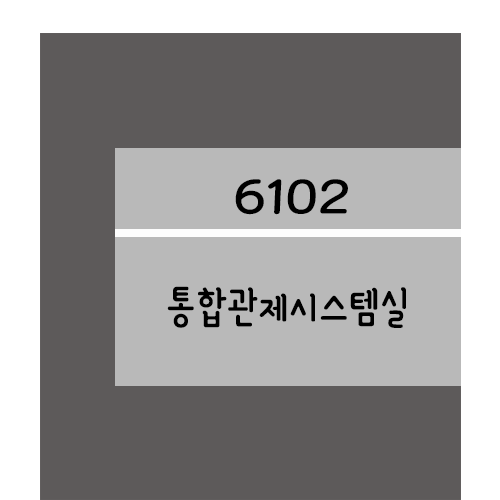
<style>
.page{position:relative;width:500px;height:500px;background:#5d5a5a}
.page>*{position:absolute;margin:0}
.t1{font:61.2px "YanoljaYacheR";color:#000000;scale:1.18 1}
.t2{font:48px "YanoljaYacheR";color:#000000}
</style>
<div class="page">
<p class="t1" style="left:235px;top:179px;width:113px;height:36px">6102</p>
<p class="t2" style="left:167px;top:286px;width:239px;height:42px">통합관제시스템실</p>
</div>
